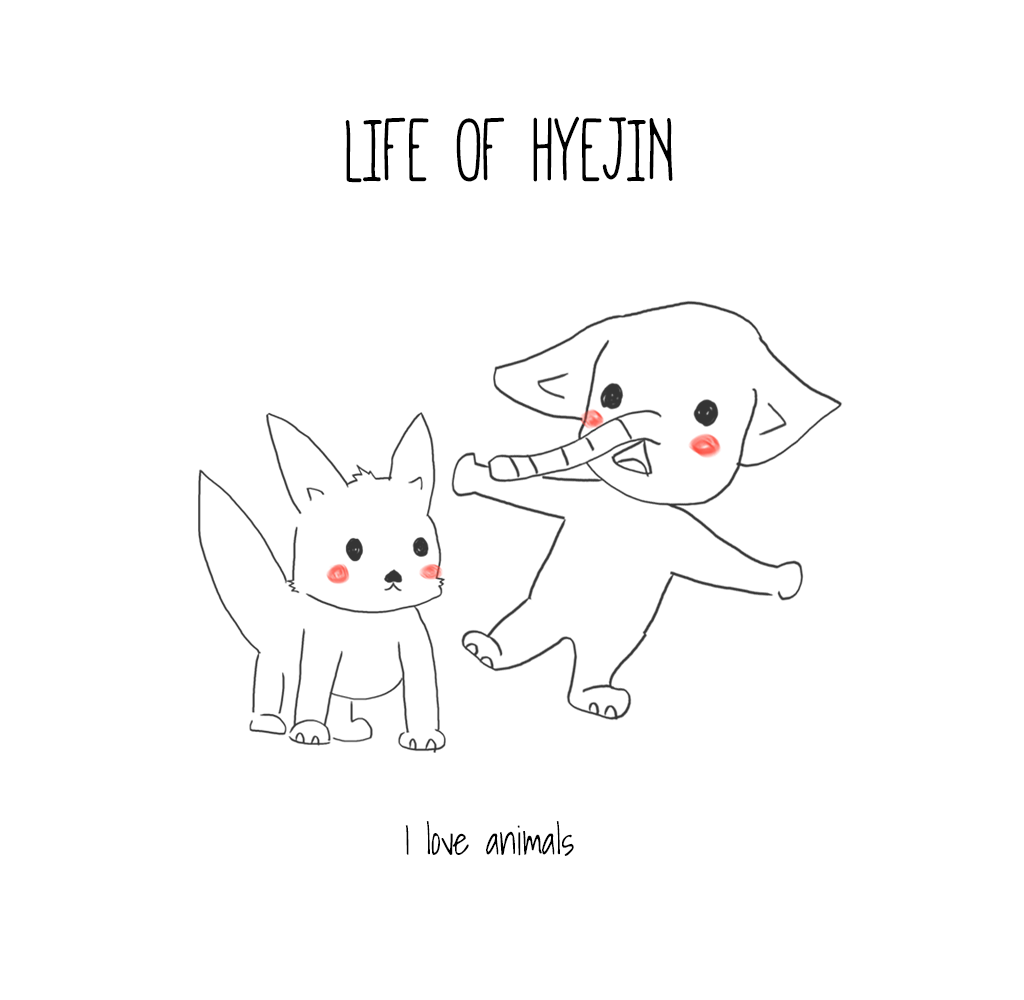
<style>
.page{position:relative;width:1024px;height:1000px;background:#ffffff}
.page>*{position:absolute;margin:0}
.t1{font:100px "Mathlete-Bulky";color:#000000;scale:0.9 1}
.t2{font:40px "ShadowsIntoLight";color:#000000;scale:0.9 1}
</style>
<div class="page">
<p class="t1" style="left:345px;top:116px;width:328px;height:67px">LIFE OF HYEJIN</p>
<p class="t2" style="left:405px;top:821px;width:169px;height:35px">I love animals</p>
</div>
